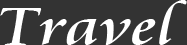
<style>
.page{position:relative;width:187px;height:45px;background:#333333}
.page>*{position:absolute;margin:0}
.t1{font:58px "CataneoBT-Regular";color:#ffffff;scale:1.24 1}
</style>
<div class="page">
<p class="t1" style="left:0px;top:0px;width:187px;height:45px">Travel</p>
</div>
